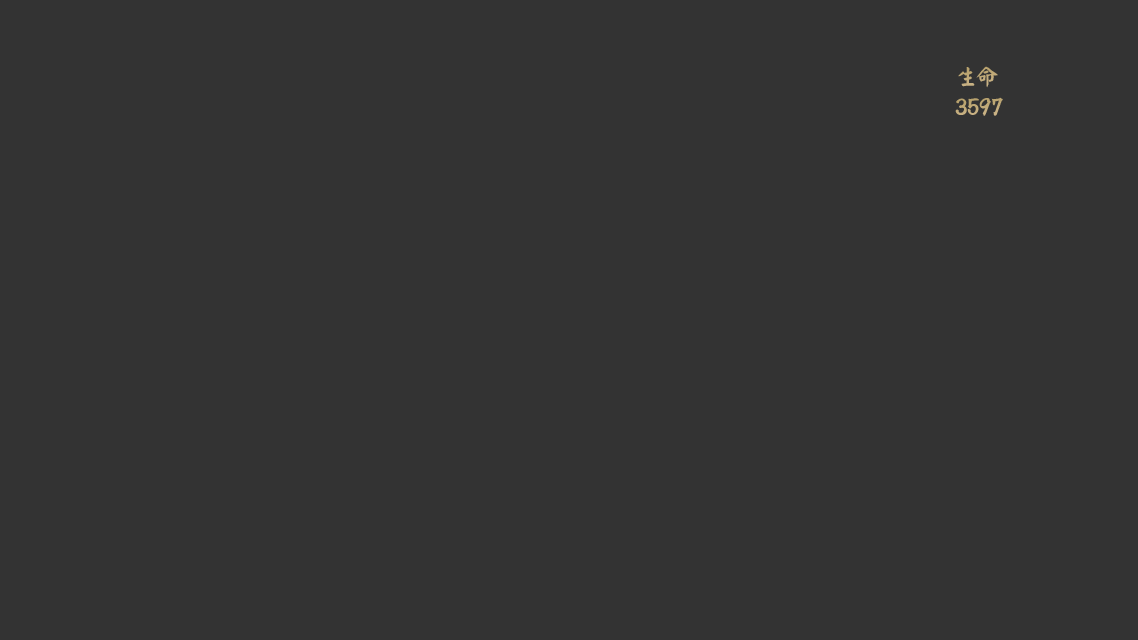
<style>
.page{position:relative;width:1138px;height:640px;background:#333333}
.page>*{position:absolute;margin:0}
.t1{font:19.8px "Tianshi-Yanti";letter-spacing:0.05em;color:#c1aa79}
.t2{font:23px "Tianshi-Yanti";letter-spacing:0.02em;color:#bfa976}
</style>
<div class="page">
<p class="t1" style="left:958px;top:66px;width:40px;height:22px">生命</p>
<p class="t2" style="left:955px;top:97px;width:48px;height:19px">3597</p>
</div>
